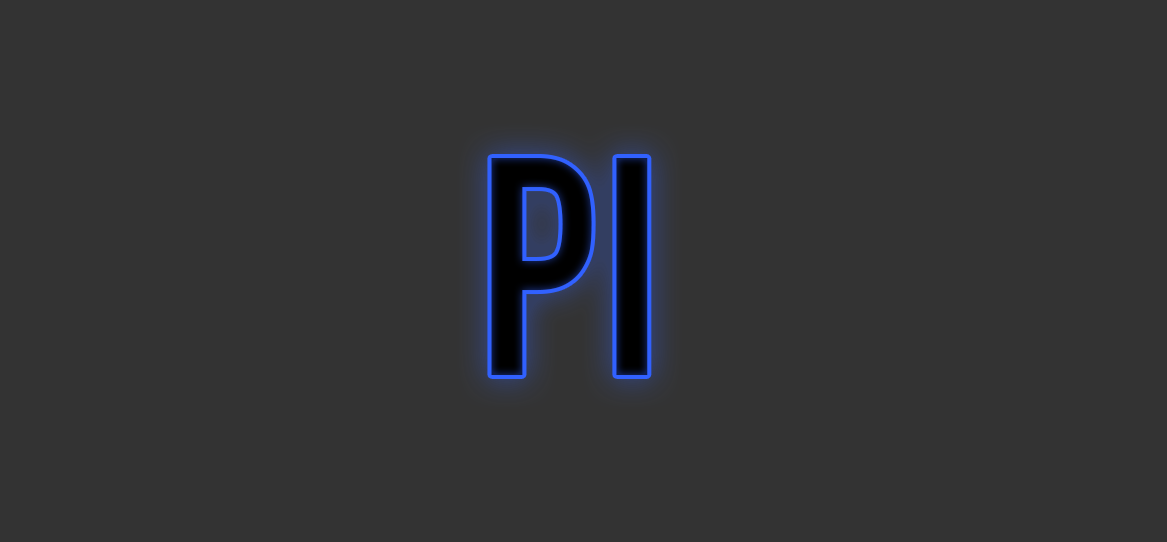
<style>
.page{position:relative;width:1167px;height:542px;background:#333333}
.page>*{position:absolute;margin:0}
.t1{font:302.5px "DINEngschrift";color:#010204}
</style>
<div class="page">
<p class="t1" style="left:491px;top:158px;width:157px;height:217px">PI</p>
</div>
